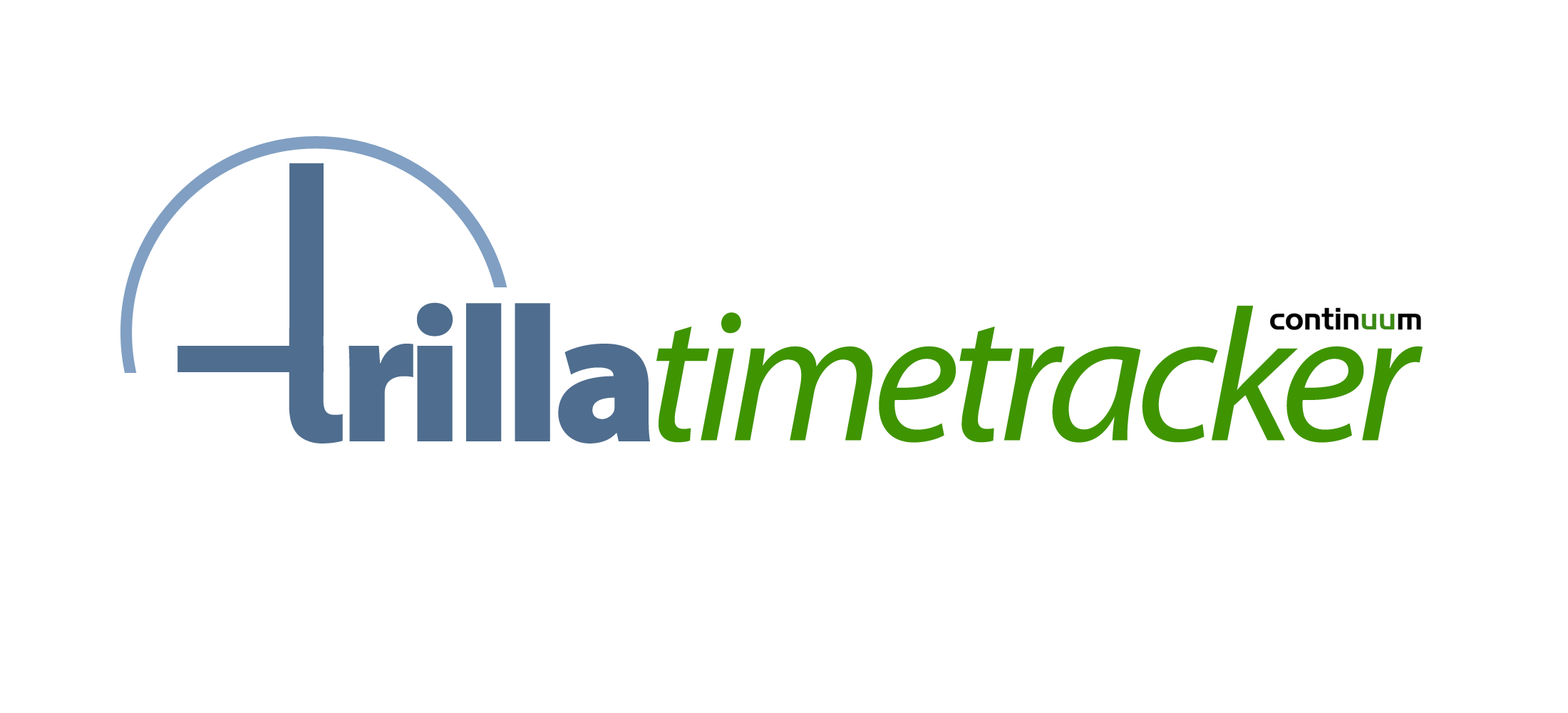
<style>
.page{position:relative;width:1568px;height:713px;background:#ffffff}
.page>*{position:absolute;margin:0}
.t1{font:193.9px "MyriadPro-Black";letter-spacing:-0.04em;color:#4f6d8e}
.t2{font:193.9px "MyriadPro-Black";letter-spacing:-0.05em;color:#4f6d8e}
.t3{font:189.2px "MyriadPro-It";letter-spacing:-0.05em;color:#3f9401}
</style>
<div class="page">
<p class="t1" style="left:277px;top:302px;width:374px;height:141px"><span class="t2">tr</span>illa</p>
<p class="t3" style="left:656px;top:305px;width:767px;height:138px">timetracker</p>
</div>
